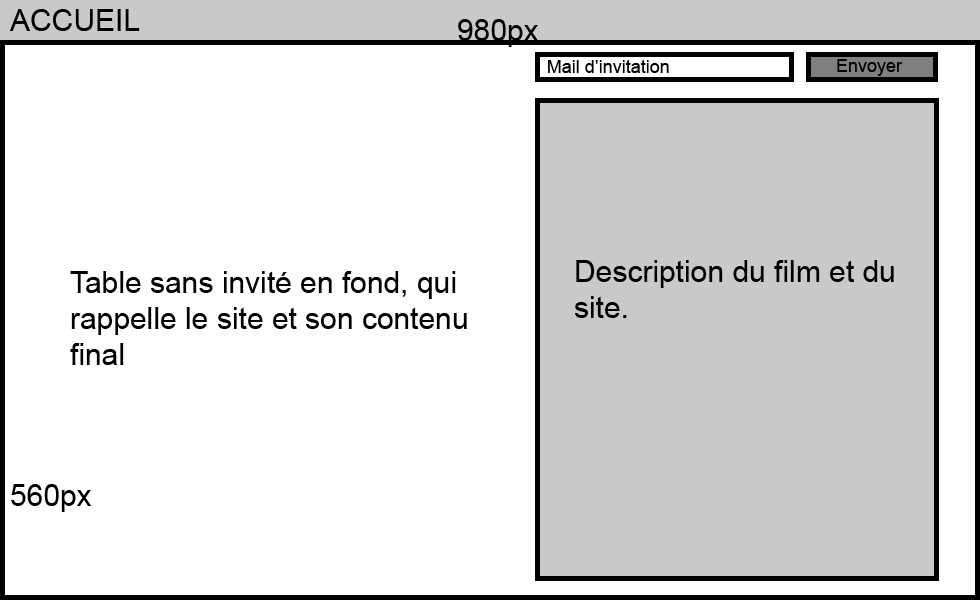
<style>
.page{position:relative;width:980px;height:600px;background:#ffffff}
.page>*{position:absolute;margin:0}
.t1{font:30px "ArialMT";color:#000000}
</style>
<div class="page">
<p class="t1" style="left:9px;top:9px;width:131px;height:22px">ACCUEIL</p>
<p class="t1" style="left:458px;top:19px;width:81px;height:28px">980px</p>
<p class="t1" style="left:575px;top:260px;width:319px;height:58px">Description du film et du site.</p>
<p class="t1" style="left:70px;top:271px;width:397px;height:94px">Table sans invité en fond, qui rappelle le site et son contenu final</p>
<p class="t1" style="left:11px;top:484px;width:81px;height:28px">560px</p>
</div>
